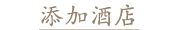
<style>
.page{position:relative;width:170px;height:30px;background:#ffffff}
.page>*{position:absolute;margin:0}
.t1{font:25px "AdobeKaitiStd-Regular";color:#978169;text-decoration:underline}
</style>
<div class="page">
<p class="t1" style="left:39px;top:4px;width:101px;height:27px">添加酒店</p>
</div>
